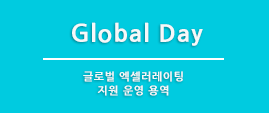
<style>
.page{position:relative;width:269px;height:113px;background:#00cbe0}
.page>*{position:absolute;margin:0}
.t1{font:24px "NanumGothicExtraBold";letter-spacing:0.05em;color:#f6f8f9}
.t2{font:11px/14px "NanumGothicExtraBold";letter-spacing:0.05em;color:#f6f8f9}
</style>
<div class="page">
<p class="t1" style="left:72px;top:22px;width:131px;height:24px">Global Day</p>
<p class="t2" style="left:83px;top:71px;width:100px;height:25px;text-align:center">글로벌 엑셀러레이팅<br>지원 운영 용역</p>
</div>
